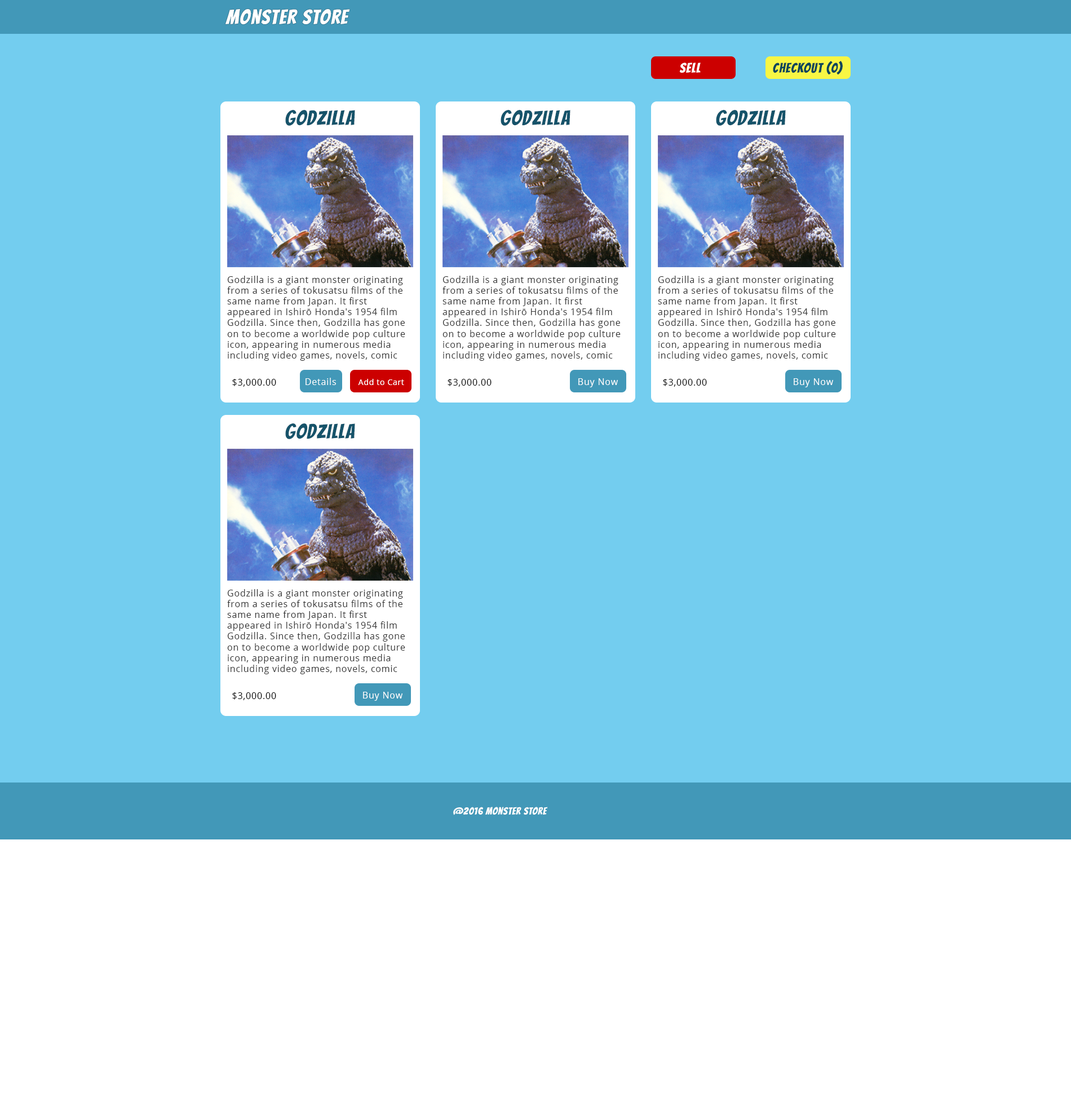
<style>
.page{position:relative;width:1071px;height:1114px;background:#73cdef}
.page>*{position:absolute;margin:0}
.t1{font:20.3px "Bangers-Regular";letter-spacing:0.05em;color:#ffffff}
.t2{font:13.5px "Bangers-Regular";letter-spacing:0.05em;color:#ffffff}
.t3{font:13.5px "Bangers-Regular";letter-spacing:0.05em;color:#0b455b}
.t4{font:20.3px "Bangers-Regular";letter-spacing:0.05em;color:#16536a}
.t5{font:9px "OpenSans";letter-spacing:0.05em;color:#333333}
.t6{font:9px "OpenSans";letter-spacing:0.05em;color:#ffffff}
.t7{font:9px "OpenSans";letter-spacing:0.05em;color:#000000}
.t8{font:7.9px "OpenSans";letter-spacing:0.05em;color:#ffffff}
.t9{font:10.1px "Bangers-Regular";letter-spacing:0.05em;color:#ffffff}
</style>
<div class="page">
<p class="t1" style="left:225px;top:8px;width:125px;height:17px">Monster Store</p>
<p class="t2" style="left:679px;top:63px;width:22px;height:10px">SELL</p>
<p class="t3" style="left:773px;top:61px;width:70px;height:14px">Checkout (0)</p>
<p class="t4" style="left:285px;top:110px;width:70px;height:16px">GodZilla</p>
<p class="t4" style="left:500px;top:110px;width:70px;height:16px">GodZilla</p>
<p class="t4" style="left:716px;top:110px;width:70px;height:16px">GodZilla</p>
<p class="t5" style="left:227px;top:276px;width:178px;height:85px">Godzilla is a giant monster originating from a series of tokusatsu films of the same name from Japan. It first appeared in Ishirō Honda's 1954 film Godzilla. Since then, Godzilla has gone on to become a worldwide pop culture icon, appearing in numerous media including video games, novels, comic books, television shows, 28 films <br>produced by Toho and two Hollywood films. The character is commonly alluded to by the title King of the Monsters, a phrase first used in Godzilla, King of the Monsters!, the Americanized version of Honda's original 1954 film.</p>
<p class="t5" style="left:442px;top:276px;width:178px;height:85px">Godzilla is a giant monster originating from a series of tokusatsu films of the same name from Japan. It first appeared in Ishirō Honda's 1954 film Godzilla. Since then, Godzilla has gone on to become a worldwide pop culture icon, appearing in numerous media including video games, novels, comic books, television shows, 28 films <br>produced by Toho and two Hollywood films. The character is commonly alluded to by the title King of the Monsters, a phrase first used in Godzilla, King of the Monsters!, the Americanized version of Honda's original 1954 film.</p>
<p class="t5" style="left:658px;top:276px;width:178px;height:85px">Godzilla is a giant monster originating from a series of tokusatsu films of the same name from Japan. It first appeared in Ishirō Honda's 1954 film Godzilla. Since then, Godzilla has gone on to become a worldwide pop culture icon, appearing in numerous media including video games, novels, comic books, television shows, 28 films <br>produced by Toho and two Hollywood films. The character is commonly alluded to by the title King of the Monsters, a phrase first used in Godzilla, King of the Monsters!, the Americanized version of Honda's original 1954 film.</p>
<p class="t6" style="left:305px;top:378px;width:31px;height:7px">Details</p>
<p class="t7" style="left:232px;top:379px;width:44px;height:8px">$3,000.00</p>
<p class="t8" style="left:358px;top:379px;width:46px;height:6px">Add to Cart</p>
<p class="t7" style="left:447px;top:379px;width:44px;height:8px">$3,000.00</p>
<p class="t6" style="left:578px;top:378px;width:40px;height:9px">Buy Now</p>
<p class="t7" style="left:663px;top:379px;width:44px;height:8px">$3,000.00</p>
<p class="t6" style="left:794px;top:378px;width:39px;height:9px">Buy Now</p>
<p class="t4" style="left:285px;top:423px;width:70px;height:16px">GodZilla</p>
<p class="t5" style="left:227px;top:589px;width:178px;height:85px">Godzilla is a giant monster originating from a series of tokusatsu films of the same name from Japan. It first appeared in Ishirō Honda's 1954 film Godzilla. Since then, Godzilla has gone on to become a worldwide pop culture icon, appearing in numerous media including video games, novels, comic books, television shows, 28 films <br>produced by Toho and two Hollywood films. The character is commonly alluded to by the title King of the Monsters, a phrase first used in Godzilla, King of the Monsters!, the Americanized version of Honda's original 1954 film.</p>
<p class="t7" style="left:232px;top:692px;width:44px;height:8px">$3,000.00</p>
<p class="t6" style="left:363px;top:691px;width:39px;height:10px">Buy Now</p>
<p class="t9" style="left:453px;top:806px;width:95px;height:9px">@2016 Monster Store</p>
</div>
